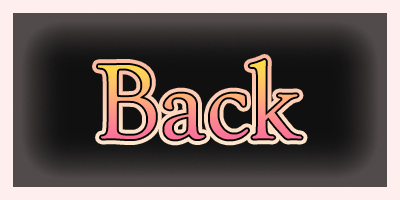
<style>
.page{position:relative;width:400px;height:200px}
.page>*{position:absolute;margin:0}
.t1{font:108.3px "GoudyOldStyleT-Regular"}
</style>
<div class="page">
<p class="t1" style="left:98px;top:60px;width:204px;height:80px">Back</p>
</div>
